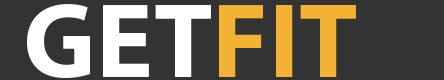
<style>
.page{position:relative;width:444px;height:80px;background:#333333}
.page>*{position:absolute;margin:0}
.t1{font:107px "MyriadPro-Bold";color:#ffffff}
.t2{font:107px "MyriadPro-Bold";color:#f3b233}
</style>
<div class="page">
<p class="t1" style="left:27px;top:4px;width:329px;height:75px">GET<span class="t2">FIT</span></p>
</div>
